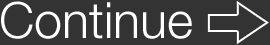
<style>
.page{position:relative;width:270px;height:45px;background:#333333}
.page>*{position:absolute;margin:0}
.t1{font:50px "HelveticaNeueLTCom-Lt";color:#ffffff}
</style>
<div class="page">
<p class="t1" style="left:1px;top:1px;width:191px;height:38px">Continue</p>
</div>
